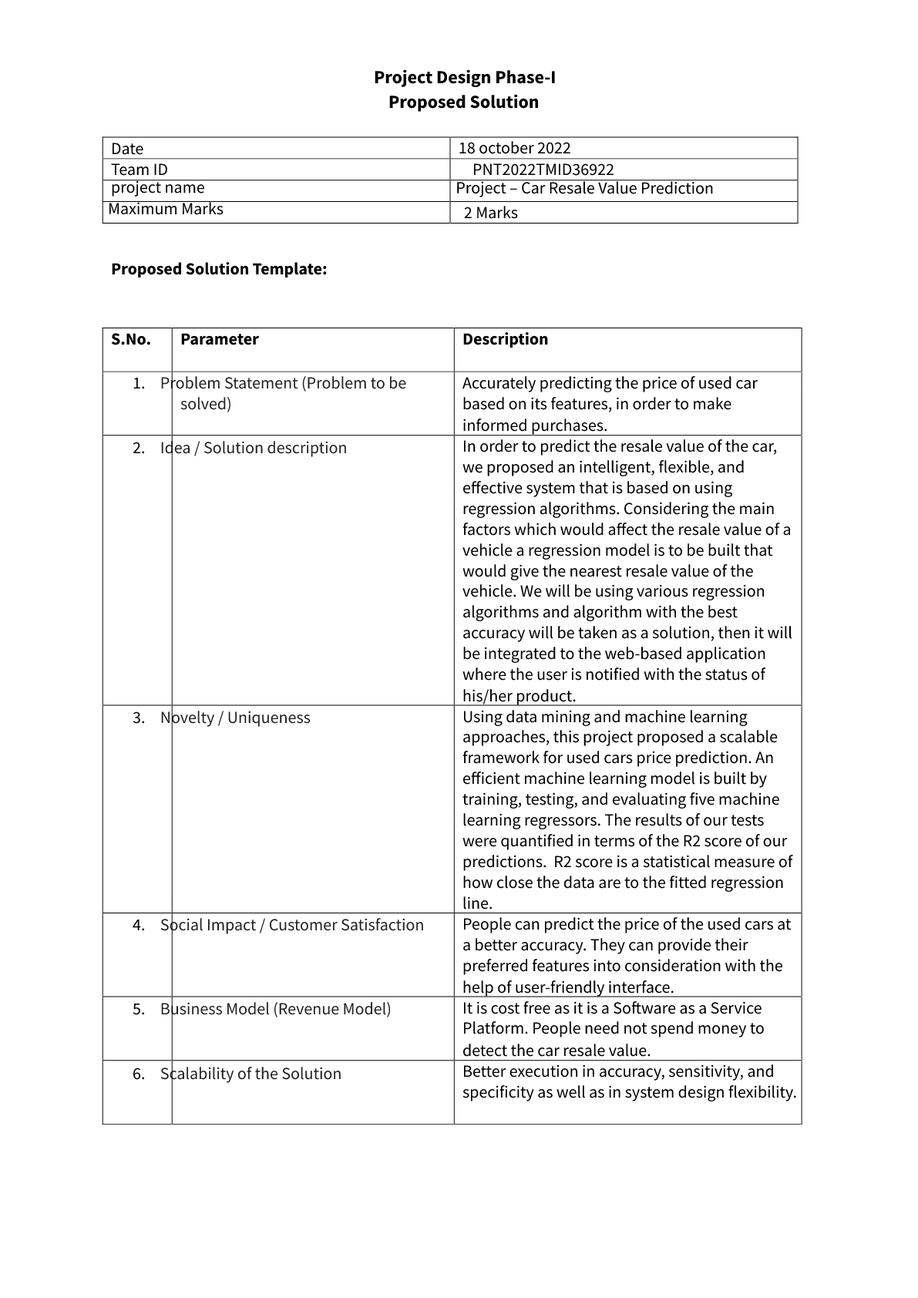
<style>
.page{position:relative;width:918px;height:1298px;background:#ffffff}
.page>*{position:absolute;margin:0}
.t1{font:18.5px "Calibri-Bold";color:#000000}
.t2{font:18.5px/24.2px "Calibri-Bold";color:#000000}
.t3{font:17px "Calibri";color:#000000}
.t4{font:17px "Calibri-Bold";color:#000000}
.t5{font:17px "Calibri";letter-spacing:0.004em;color:#000000}
.t6{font:17px/21.5px "Calibri";color:#000000}
.t7{font:17px/20.8px "Calibri";color:#000000}
.t8{font:17px/20.7px "Calibri";color:#000000}
.t9{font:17px/22.2px "Calibri";letter-spacing:0.004em;color:#000000}
.t10{font:17px/22.2px "Calibri";color:#222222}
.t11{font:17px/21.5px "Calibri";color:#222222}
.t12{font:17px/21.5px "Calibri";letter-spacing:0.004em;color:#000000}
.t13{font:17px/20.8px "Calibri";color:#222222}
.t14{font:17px/22.2px "Calibri";color:#000000}
.t15{font:17px/20.5px "Calibri";color:#000000}
.t16{font:17px/20.7px "Calibri";letter-spacing:0.002em;color:#000000}
.t17{font:17px/20.7px "Calibri";letter-spacing:-0.014em;color:#000000}
.t18{font:17px/22.4px "Calibri";letter-spacing:0.004em;color:#000000}
.t19{font:17px/22.4px "Calibri";color:#222222}
.t20{font:17px/22.4px "Calibri";color:#000000}
</style>
<div class="page">
<p class="t1" style="left:375px;top:69px;width:180px;height:43px">Project Design Phase-I <span class="t2"><br>Proposed Solution</span></p>
<p class="t3" style="left:112px;top:143px;width:31px;height:12px"><span class="t4"> </span><br>Date</p>
<p class="t3" style="left:460px;top:141px;width:111px;height:13px"><span class="t5">18</span> october 2022</p>
<p class="t3" style="left:111px;top:163px;width:56px;height:13px">Team ID</p>
<p class="t3" style="left:473px;top:163px;width:141px;height:13px">PNT2022TMID36922</p>
<p class="t6" style="left:109px;top:180px;width:604px;height:35px;text-align:right">project name                                                                          Project – Car Resale Value Prediction <br>Maximum Marks</p>
<p class="t3" style="left:464px;top:206px;width:54px;height:13px">2 Marks</p>
<p class="t4" style="left:112px;top:262px;width:215px;height:16px">Proposed Solution Template:</p>
<p class="t4" style="left:111px;top:333px;width:39px;height:12px">S.No.</p>
<p class="t4" style="left:181px;top:333px;width:78px;height:12px">Parameter</p>
<p class="t4" style="left:463px;top:332px;width:85px;height:17px">Description</p>
<p class="t7" style="left:133px;top:376px;width:625px;height:81px">Accurately predicting the price of used car <br>based on its features, in order to make <span class="t8"><br>informed purchases. </span><span class="t9"><br>2.   </span><span class="t10"> Idea / Solution description</span></p>
<p class="t11" style="left:133px;top:376px;width:273px;height:37px"><span class="t12">1.   </span> Problem Statement (Problem to be <span class="t13"><br>solved)</span></p>
<p class="t8" style="left:133px;top:440px;width:660px;height:287px"><span class="t14">In order to predict the resale value of the car, </span><br>we proposed an intelligent, flexible, and <br>effective system that is based on using <br>regression algorithms. Considering the main <br>factors which would affect the resale value of a <br>vehicle a regression model is to be built that <br>would give the nearest resale value of the <br>vehicle. We will be using various regression <br>algorithms and algorithm with the best <span class="t15"><br>accuracy will be taken as a solution, then it will </span><br>be integrated to the web-based application <span class="t7"><br>where the user is notified with the status of </span><br>his/her product. <span class="t12"><br>3.   </span><span class="t11"> Novelty / Uniqueness</span></p>
<p class="t8" style="left:133px;top:710px;width:660px;height:225px"><span class="t6">Using data mining and machine learning </span><br>approaches, this project proposed a scalable <br>framework for used cars price prediction. An <br>efficient machine learning model is built by <span class="t16"><br>tr</span>aining, testing, and evaluating five machine <br>learning regressors. The results of our tests <br>were quantified in terms of the R2 score of our <br>predictions.  R2 score is a statistical measure of <span class="t15"><br>how close the data are to the fitted regression </span><br>line. <span class="t12"><br>4.   </span><span class="t11"> Social Impact / Customer Satisfaction</span></p>
<p class="t6" style="left:133px;top:918px;width:659px;height:100px">People can predict the price of the used cars at <span class="t8"><br>a better accuracy. They can provide their </span><span class="t7"><br>preferred features into consideration with the </span><span class="t8"><br>help of user-friendly interface. </span><span class="t12"><br>5.   </span><span class="t11"> Business Model (Revenue Model)</span></p>
<p class="t8" style="left:133px;top:1002px;width:631px;height:81px"><span class="t6">It is cost free as it is a Software as a Service </span><br>Platform. People need not spend money to <br>detect the car resale value<span class="t17">.  </span><span class="t18"><br>6.   </span><span class="t19"> Scalability of the Solution</span></p>
<p class="t8" style="left:463px;top:1065px;width:334px;height:37px"><span class="t20">Better execution in accuracy, sensitivity, and </span><br>specificity as well as in system design flexibility.</p>
</div>
